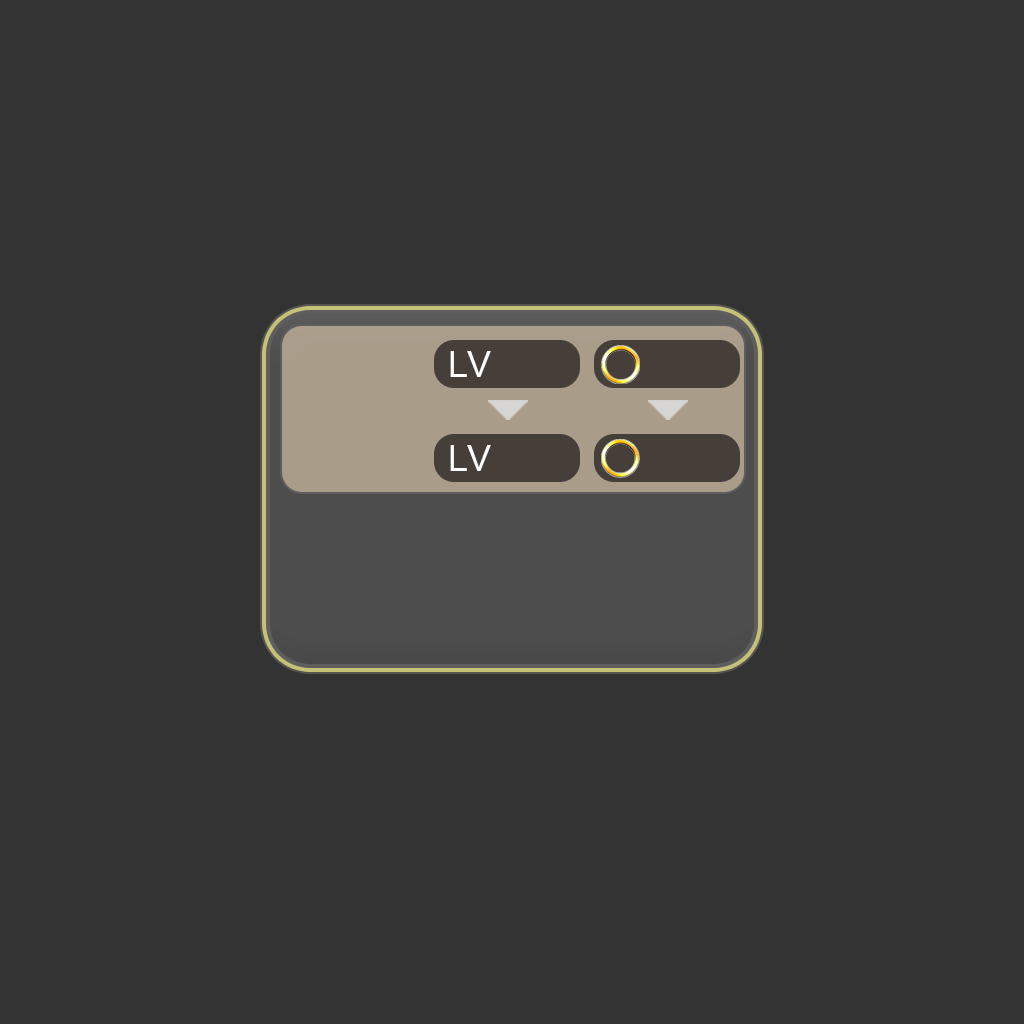
<style>
.page{position:relative;width:1024px;height:1024px;background:#333333}
.page>*{position:absolute;margin:0}
.t1{font:36px "ArialMT";letter-spacing:0.025em;color:#ffffff}
</style>
<div class="page">
<p class="t1" style="left:450px;top:351px;width:41px;height:26px">LV</p>
<p class="t1" style="left:450px;top:445px;width:41px;height:26px">LV</p>
</div>
